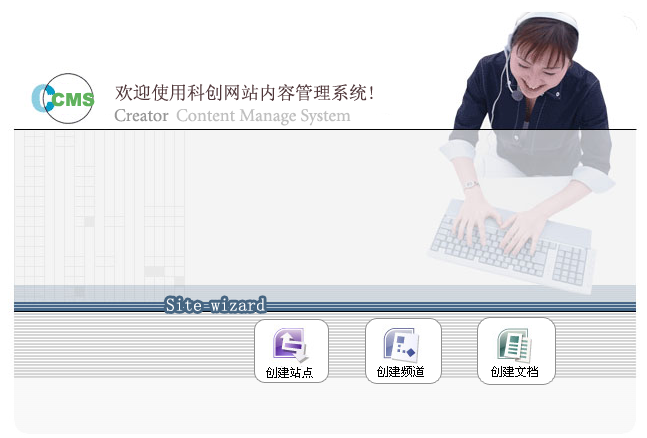
<style>
.page{position:relative;width:647px;height:438px;background:#ffffff}
.page>*{position:absolute;margin:0}
.t1{font:18px "SimSun";color:#4e3538}
.t2{font:18px "Arial-Black";color:#60b25d}
.t3{font:18px "Minion-Regular";color:#969696}
.t4{font:18px "Minion-Regular";color:#bfbfbf}
.t5{font:18px "SimSun";color:#ffffff}
</style>
<div class="page">
<p class="t1" style="left:115px;top:84px;width:258px;height:17px">欢迎使用科创网站内容管理系统!</p>
<p class="t2" style="left:51px;top:92px;width:44px;height:15px">CMS</p>
<p class="t3" style="left:114px;top:109px;width:55px;height:13px">Creator</p>
<p class="t4" style="left:176px;top:109px;width:175px;height:17px">Content Manage System</p>
<p class="t5" style="left:166px;top:298px;width:99px;height:13px">Site wizard</p>
</div>
